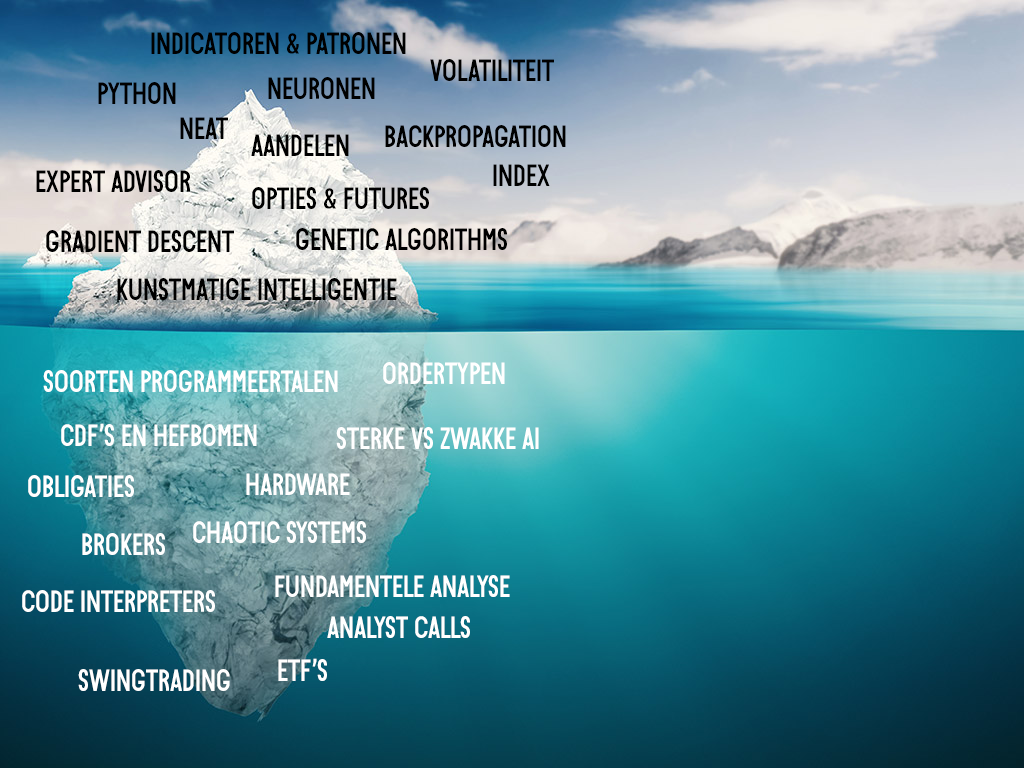
<style>
.page{position:relative;width:1024px;height:768px}
.page>*{position:absolute;margin:0}
.t1{font:30.7px "BonjourDeJongSans";color:#000000}
.t2{font:30.7px "BonjourDeJongSans";color:#ffffff}
</style>
<div class="page">
<p class="t1" style="left:151px;top:32px;width:255px;height:22px">Indicatoren &amp; patronen</p>
<p class="t1" style="left:430px;top:59px;width:124px;height:22px">volatiliteit</p>
<p class="t1" style="left:268px;top:77px;width:107px;height:22px">neuronen</p>
<p class="t1" style="left:98px;top:82px;width:78px;height:22px">python</p>
<p class="t1" style="left:180px;top:117px;width:48px;height:22px">NEAT</p>
<p class="t1" style="left:385px;top:125px;width:181px;height:22px">backpropagation</p>
<p class="t1" style="left:251px;top:134px;width:98px;height:22px">Aandelen</p>
<p class="t1" style="left:36px;top:170px;width:154px;height:22px">expert advisor</p>
<p class="t1" style="left:493px;top:164px;width:57px;height:22px">index</p>
<p class="t1" style="left:252px;top:187px;width:177px;height:22px">opties &amp; futures</p>
<p class="t1" style="left:46px;top:230px;width:188px;height:22px">gradient descent</p>
<p class="t1" style="left:296px;top:228px;width:211px;height:22px">genetic algorithms</p>
<p class="t1" style="left:117px;top:278px;width:280px;height:22px">Kunstmatige intelligentie</p>
<p class="t2" style="left:383px;top:362px;width:122px;height:22px">Ordertypen</p>
<p class="t2" style="left:43px;top:370px;width:295px;height:22px">soorten programmeertalen</p>
<p class="t2" style="left:61px;top:423px;width:196px;height:23px">CDF’s en hefbomen</p>
<p class="t2" style="left:336px;top:427px;width:203px;height:22px">sterke vs zwakke AI</p>
<p class="t2" style="left:246px;top:473px;width:104px;height:22px">hardware</p>
<p class="t2" style="left:28px;top:475px;width:106px;height:22px">Obligaties</p>
<p class="t2" style="left:193px;top:521px;width:173px;height:22px">chaotic systems</p>
<p class="t2" style="left:82px;top:533px;width:83px;height:22px">Brokers</p>
<p class="t2" style="left:275px;top:575px;width:235px;height:22px">fundamentele analyse</p>
<p class="t2" style="left:22px;top:590px;width:193px;height:22px">code interpreters</p>
<p class="t2" style="left:327px;top:616px;width:143px;height:22px">analyst calls</p>
<p class="t2" style="left:278px;top:658px;width:49px;height:23px">ETF’s</p>
<p class="t2" style="left:78px;top:669px;width:152px;height:22px">Swingtrading</p>
</div>
